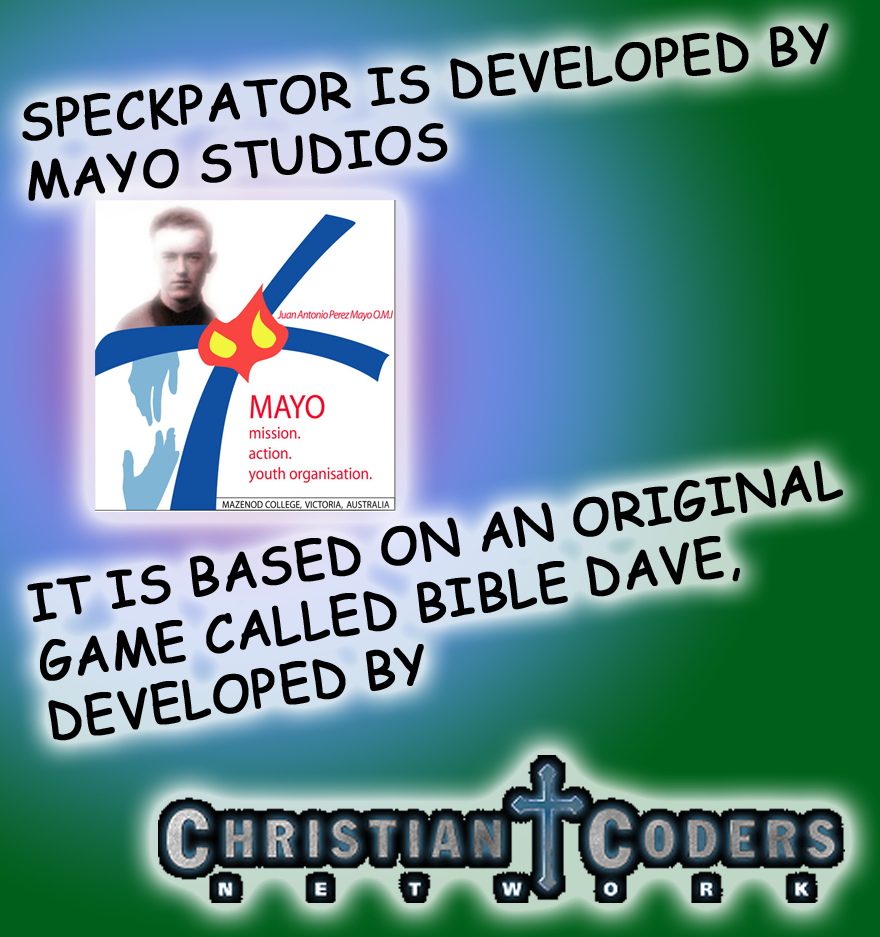
<style>
.page{position:relative;width:880px;height:937px}
.page>*{position:absolute;margin:0}
.t1{font:50px "ComicSansMS";color:#000000;font-weight:bold}
</style>
<div class="page">
<p class="t1" style="left:22px;top:23px;width:807px;height:178px;rotate:-6deg">SPECKPATOR IS DEVELOPED BY MAYO STUDIOS</p>
<p class="t1" style="left:27px;top:460px;width:816px;height:281px;rotate:-9deg">IT IS BASED ON AN ORIGINAL GAME CALLED BIBLE DAVE,<br>DEVELOPED BY</p>
</div>
